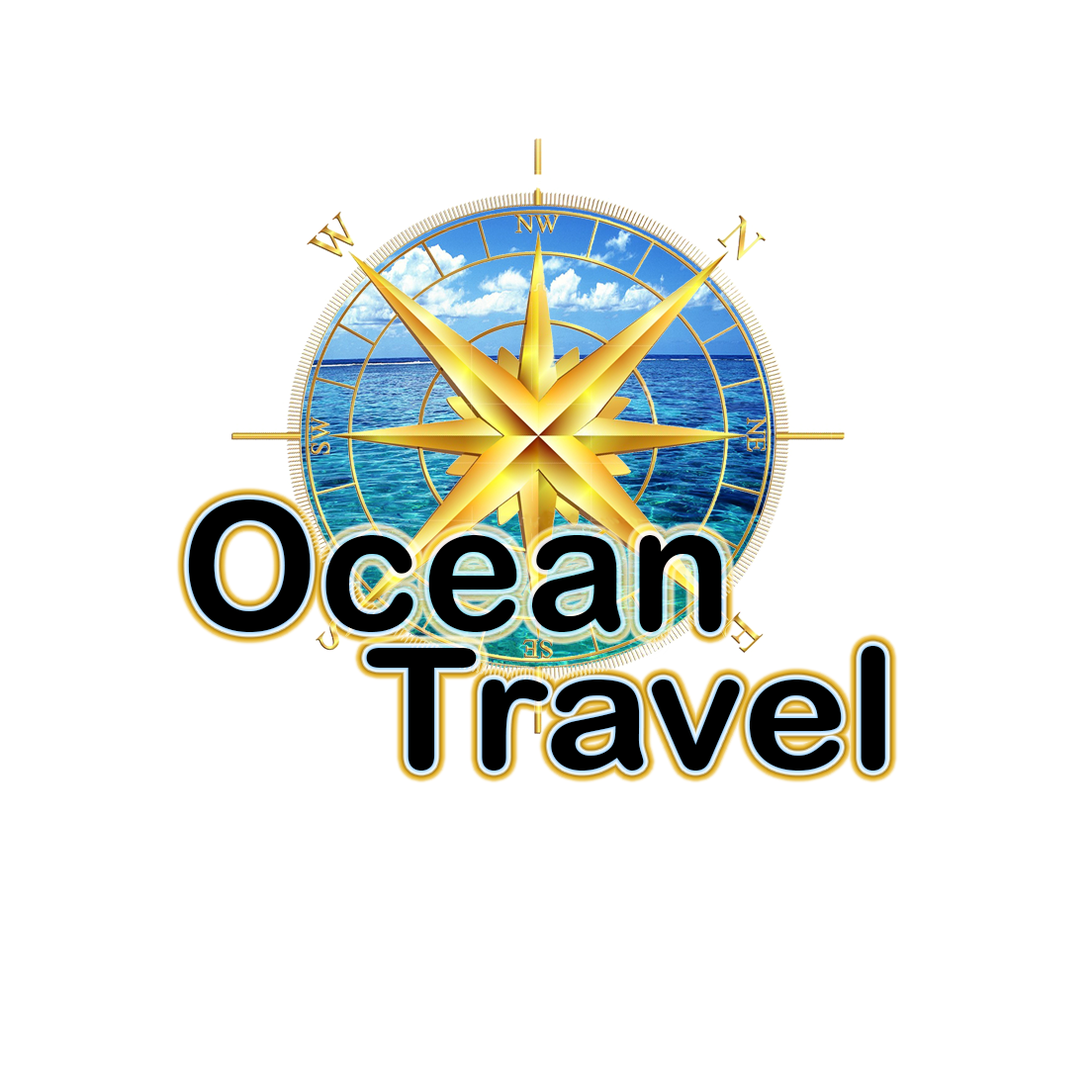
<style>
.page{position:relative;width:1092px;height:1092px;background:#ffffff}
.page>*{position:absolute;margin:0}
.t1{font:179.4px "ArialRoundedMTBold";color:#000000;scale:0.97 1}
.t2{font:168.4px "ArialRoundedMTBold";color:#000000;scale:1.07 1}
</style>
<div class="page">
<p class="t1" style="left:188px;top:499px;width:534px;height:133px">Ocean</p>
<p class="t2" style="left:366px;top:646px;width:519px;height:125px">Travel</p>
</div>
